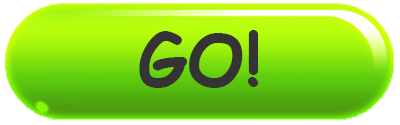
<style>
.page{position:relative;width:400px;height:125px}
.page>*{position:absolute;margin:0}
.t1{font:72px "ComicSansMS-Bold";color:#353333}
</style>
<div class="page">
<p class="t1" style="left:139px;top:30px;width:120px;height:58px">GO!</p>
</div>
